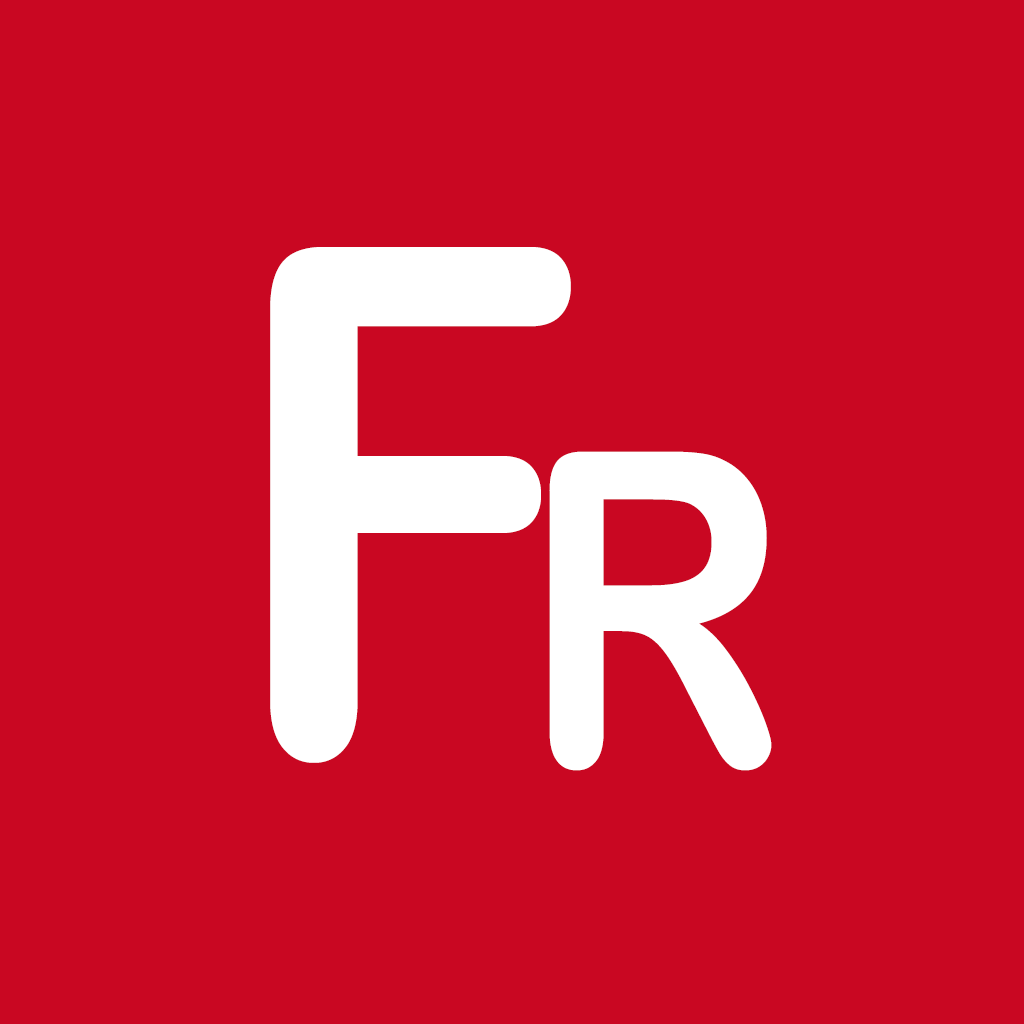
<style>
.page{position:relative;width:1024px;height:1024px;background:#c90722}
.page>*{position:absolute;margin:0}
.t1{font:708.3px "ArialRoundedMTBold";color:#ffffff;scale:0.85 1}
.t2{font:437.5px "ArialRoundedMTBold";color:#ffffff;scale:0.85 1}
</style>
<div class="page">
<p class="t1" style="left:270px;top:247px;width:301px;height:516px">F</p>
<p class="t2" style="left:549px;top:451px;width:223px;height:320px">R</p>
</div>
